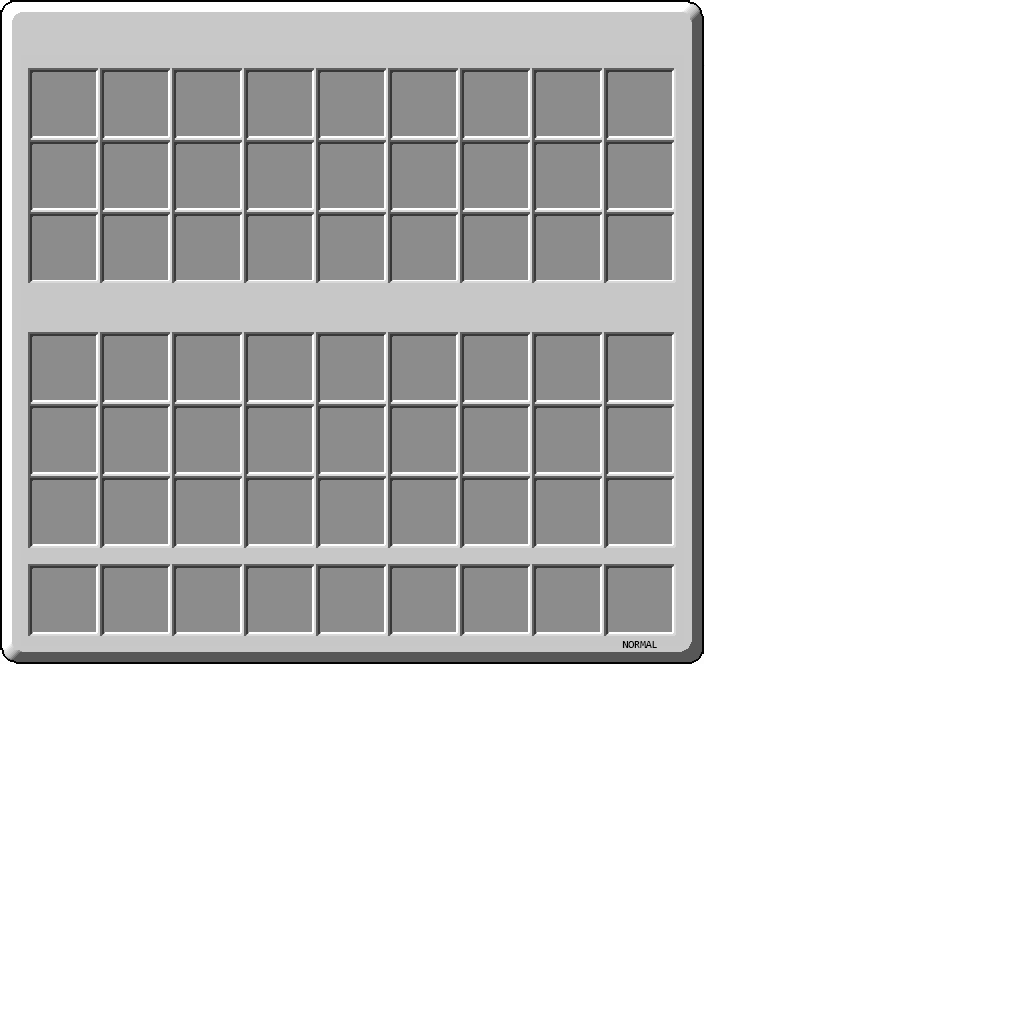
<style>
.page{position:relative;width:1024px;height:1024px;background:#ffffff}
.page>*{position:absolute;margin:0}
.t1{font:11px "Consolas";letter-spacing:-0.02em;color:#000000}
</style>
<div class="page">
<p class="t1" style="left:622px;top:641px;width:35px;height:7px">NORMAL</p>
</div>
